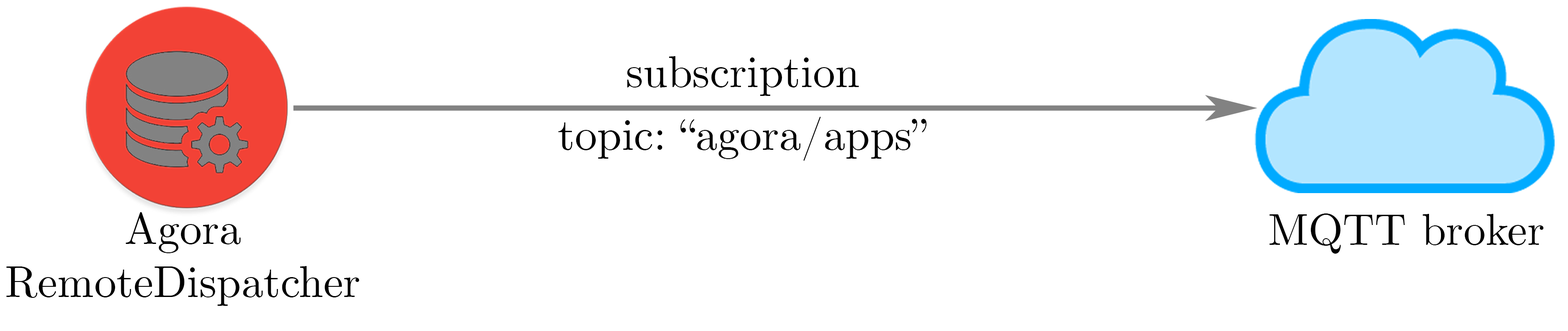
<style>
.page{position:relative;width:1568px;height:331px;background:#ffffff}
.page>*{position:absolute;margin:0}
.t1{font:44.3px "CMUSerif-Roman";color:#000000}
</style>
<div class="page">
<p class="t1" style="left:627px;top:56px;width:232px;height:40px">subscription</p>
<p class="t1" style="left:558px;top:117px;width:369px;height:44px">topic: “agora/apps”</p>
<p class="t1" style="left:6px;top:212px;width:353px;height:94px;text-align:center">Agora<br>RemoteDispatcher</p>
<p class="t1" style="left:1269px;top:214px;width:275px;height:40px">MQTT broker</p>
</div>
